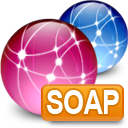
<style>
.page{position:relative;width:128px;height:128px;background:#ffffff}
.page>*{position:absolute;margin:0}
.t1{font:33.3px "Arial-BoldMT";letter-spacing:-0.04em;color:#ffffff;scale:0.82 1}
</style>
<div class="page">
<p class="t1" style="left:46px;top:90px;width:73px;height:24px">SOAP</p>
</div>
